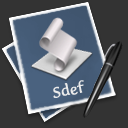
<style>
.page{position:relative;width:128px;height:128px;background:#333333}
.page>*{position:absolute;margin:0}
.t1{font:14px "LucidaCasual";color:#eaeaea;font-weight:bold}
</style>
<div class="page">
<p class="t1" style="left:53px;top:80px;width:31px;height:18px;rotate:-11deg">Sdef</p>
</div>
